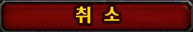
<style>
.page{position:relative;width:193px;height:32px}
.page>*{position:absolute;margin:0}
.t1{font:20px "YDI2002";color:#f8c619}
</style>
<div class="page">
<p class="t1" style="left:75px;top:6px;width:45px;height:18px">취  소</p>
</div>
